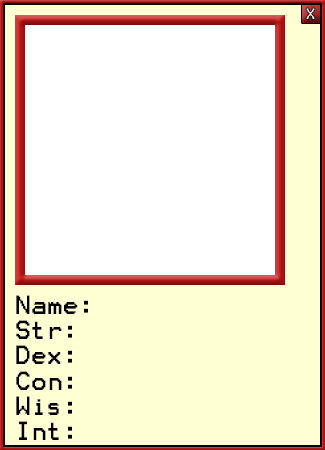
<style>
.page{position:relative;width:325px;height:450px;background:#ffffff}
.page>*{position:absolute;margin:0}
.t1{font:12.7px "Terminal";color:#ffffff}
.t2{font:21.1px "Terminal";color:#000000}
</style>
<div class="page">
<p class="t1" style="left:306px;top:8px;width:9px;height:11px">X</p>
<p class="t2" style="left:16px;top:295px;width:72px;height:145px">Name:<br>Str:<br>Dex:<br>Con:<br>Wis:<br>Int:</p>
</div>
